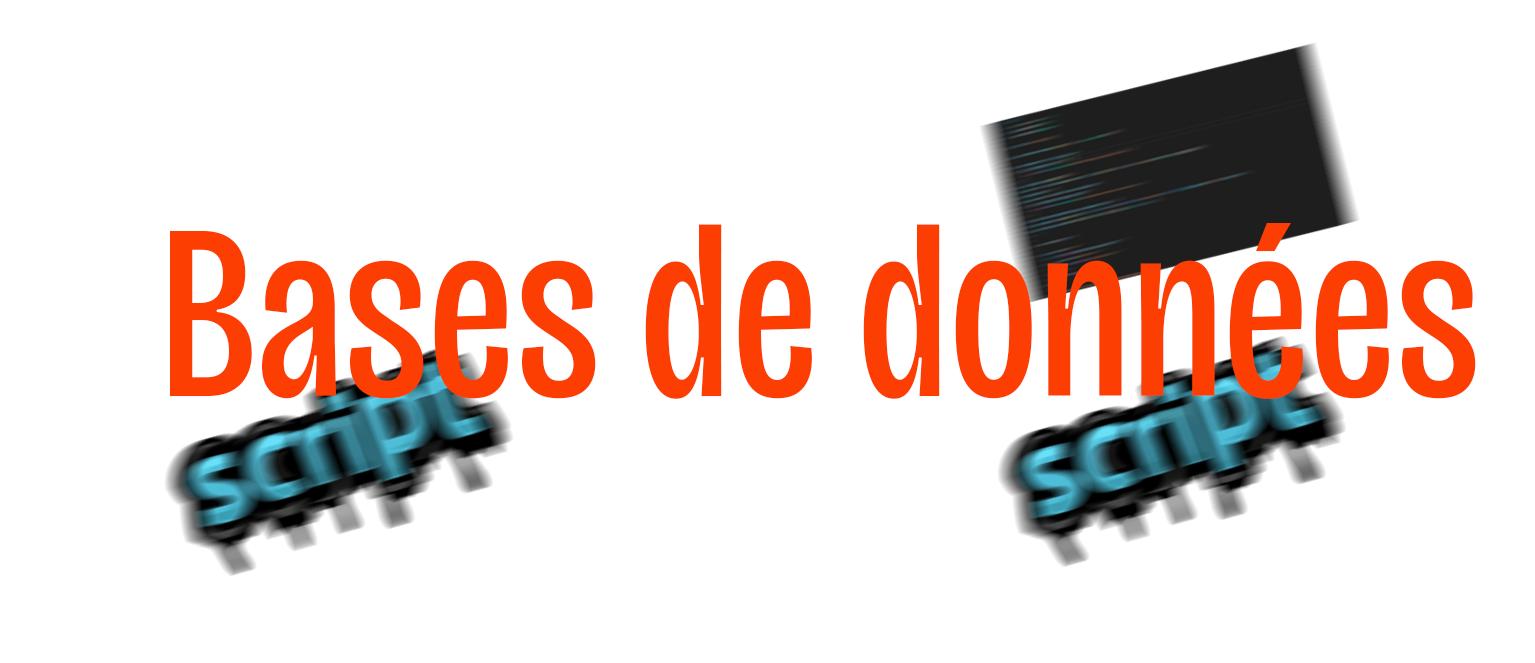
<style>
.page{position:relative;width:1535px;height:663px;background:#ffffff}
.page>*{position:absolute;margin:0}
.t1{font:250px "BricolageGrotesque72ptCondensed-Regular";color:#fc3e03}
</style>
<div class="page">
<p class="t1" style="left:170px;top:223px;width:1306px;height:176px">Bases de données</p>
</div>
